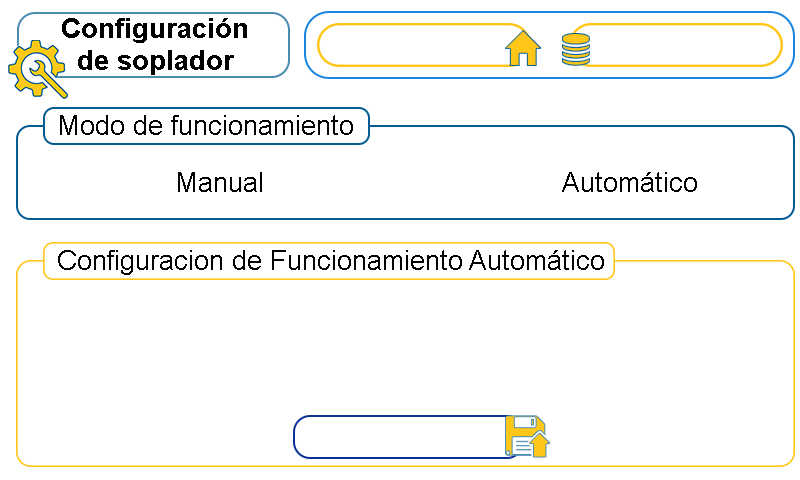
<style>
.page{position:relative;width:800px;height:480px;background:#ffffff}
.page>*{position:absolute;margin:0}
.t1{font:26.7px "Arial-BoldMT";color:#000000}
.t2{font:26.7px "ArialMT";color:#000000}
</style>
<div class="page">
<p class="t1" style="left:62px;top:18px;width:185px;height:57px">Configuración <br>  de soplador</p>
<p class="t2" style="left:60px;top:115px;width:293px;height:20px">Modo de funcionamiento</p>
<p class="t2" style="left:178px;top:172px;width:84px;height:20px">Manual</p>
<p class="t2" style="left:562px;top:172px;width:135px;height:20px">Automático</p>
<p class="t2" style="left:58px;top:250px;width:546px;height:25px">Configuracion de Funcionamiento Automático</p>
</div>
